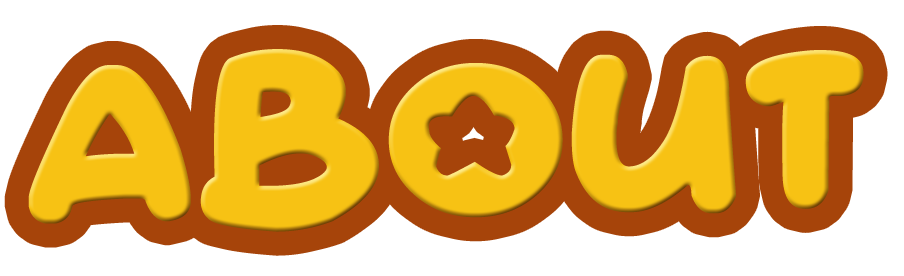
<style>
.page{position:relative;width:904px;height:276px;background:#ffffff}
.page>*{position:absolute;margin:0}
.t1{font:200px "Starborn";color:#f7c214}
</style>
<div class="page">
<p class="t1" style="left:28px;top:49px;width:836px;height:183px">About</p>
</div>
